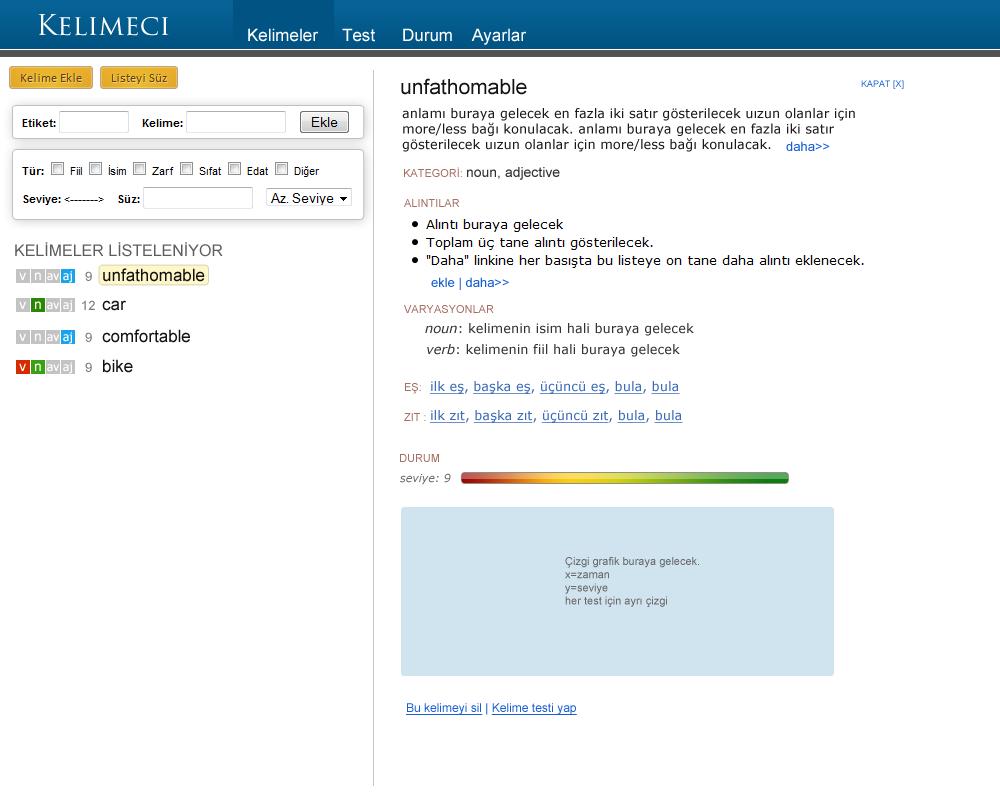
<style>
.page{position:relative;width:1000px;height:800px;background:#ffffff}
.page>*{position:absolute;margin:0}
.t1{font:28px "TrajanPro-Regular";color:#ffffff}
.t2{font:17px "ArialMT";color:#ffffff}
.t3{font:21px "ArialMT";color:#121212}
.t4{font:9px "ArialMT"}
.t5{font:13px "Verdana";color:#1a1a1a}
.t6{font:13px "ArialMT";color:#185fd4}
.t7{font:14px "ArialMT";color:#333333}
.t8{font:11px "ArialMT";color:#a56f64}
.t9{font:16px "ArialMT";color:#5d5d5d}
.t10{font:17px "ArialMT";color:#121212}
.t11{font:14px "ArialMT";color:#ffffff}
.t12{font:12px "Tahoma";color:#ffffff}
.t13{font:13px "ArialMT";color:#797979}
.t14{font:13px "Verdana";color:#333333}
.t15{font:13px "Verdana-Italic";color:#333333}
.t16{font:13px "Verdana";color:#3d6bb8;text-decoration:underline}
.t17{font:13px "Verdana";color:#3d6bb8}
.t18{font:11px "Verdana-Italic";color:#696969}
.t19{font:11px "ArialMT";color:#696969}
.t20{font:12px "ArialMT";color:#185fd4;text-decoration:underline}
.t21{font:12px "ArialMT";color:#185fd4}
</style>
<div class="page">
<p class="t1" style="left:38px;top:14px;width:131px;height:22px">Kelimeci</p>
<p class="t2" style="left:248px;top:28px;width:71px;height:14px">Kelimeler</p>
<p class="t2" style="left:342px;top:28px;width:33px;height:14px">Test</p>
<p class="t2" style="left:403px;top:28px;width:49px;height:14px">Durum</p>
<p class="t2" style="left:471px;top:28px;width:56px;height:17px">Ayarlar</p>
<p class="t3" style="left:401px;top:78px;width:126px;height:17px">unfathomable</p>
<p class="t4" style="left:861px;top:80px;width:43px;height:9px">KAPAT [X]</p>
<p class="t5" style="left:402px;top:108px;width:453px;height:44px">anlamı buraya gelecek en fazla iki satır gösterilecek uızun olanlar için more/less bağı konulacak. anlamı buraya gelecek en fazla iki satır gösterilecek uızun olanlar için more/less bağı konulacak.</p>
<p class="t6" style="left:786px;top:141px;width:44px;height:10px">daha&gt;&gt;</p>
<p class="t7" style="left:404px;top:167px;width:156px;height:13px"><span class="t8">KATEGORİ: </span>noun, adjective</p>
<p class="t8" style="left:404px;top:199px;width:56px;height:8px">ALINTILAR</p>
<p class="t9" style="left:15px;top:242px;width:208px;height:15px">KELİMELER LİSTELENİYOR</p>
<p class="t10" style="left:103px;top:268px;width:102px;height:14px">unfathomable</p>
<p class="t11" style="left:19px;top:272px;width:7px;height:8px">v</p>
<p class="t11" style="left:35px;top:272px;width:6px;height:8px">n</p>
<p class="t12" style="left:47px;top:273px;width:13px;height:8px">av</p>
<p class="t12" style="left:63px;top:271px;width:9px;height:12px">aj</p>
<p class="t13" style="left:85px;top:271px;width:7px;height:10px">9</p>
<p class="t6" style="left:431px;top:277px;width:78px;height:13px">ekle | daha&gt;&gt;</p>
<p class="t11" style="left:19px;top:301px;width:7px;height:8px">v</p>
<p class="t11" style="left:35px;top:301px;width:6px;height:8px">n</p>
<p class="t12" style="left:47px;top:302px;width:13px;height:8px">av</p>
<p class="t12" style="left:63px;top:300px;width:9px;height:12px">aj</p>
<p class="t13" style="left:82px;top:300px;width:13px;height:10px">12</p>
<p class="t10" style="left:102px;top:300px;width:24px;height:11px">car</p>
<p class="t8" style="left:404px;top:305px;width:90px;height:8px">VARYASYONLAR</p>
<p class="t10" style="left:102px;top:329px;width:88px;height:14px">comfortable</p>
<p class="t14" style="left:425px;top:323px;width:269px;height:13px"><span class="t15">noun</span>: kelimenin isim hali buraya gelecek</p>
<p class="t11" style="left:19px;top:333px;width:7px;height:8px">v</p>
<p class="t11" style="left:35px;top:333px;width:6px;height:8px">n</p>
<p class="t12" style="left:47px;top:334px;width:13px;height:8px">av</p>
<p class="t12" style="left:63px;top:332px;width:9px;height:12px">aj</p>
<p class="t13" style="left:85px;top:332px;width:7px;height:10px">9</p>
<p class="t14" style="left:427px;top:344px;width:253px;height:13px"><span class="t15">verb</span>: kelimenin fiil hali buraya gelecek</p>
<p class="t11" style="left:19px;top:363px;width:7px;height:8px">v</p>
<p class="t11" style="left:35px;top:363px;width:6px;height:8px">n</p>
<p class="t12" style="left:47px;top:364px;width:13px;height:8px">av</p>
<p class="t12" style="left:63px;top:362px;width:9px;height:12px">aj</p>
<p class="t13" style="left:85px;top:362px;width:7px;height:10px">9</p>
<p class="t10" style="left:103px;top:359px;width:30px;height:14px">bike</p>
<p class="t8" style="left:405px;top:383px;width:16px;height:11px">EŞ:</p>
<p class="t16" style="left:430px;top:381px;width:250px;height:13px">ilk eş<span class="t17">, </span>başka eş<span class="t17">, </span>üçüncü eş<span class="t17">, </span>bula<span class="t17">, </span>bula</p>
<p class="t8" style="left:404px;top:413px;width:22px;height:8px">ZIT :</p>
<p class="t16" style="left:430px;top:410px;width:253px;height:13px">ilk zıt<span class="t17">, </span>başka zıt<span class="t17">, </span>üçüncü zıt<span class="t17">, </span>bula<span class="t17">, </span>bula</p>
<p class="t8" style="left:400px;top:454px;width:39px;height:8px">DURUM</p>
<p class="t18" style="left:400px;top:473px;width:51px;height:12px">seviye: 9</p>
<p class="t19" style="left:565px;top:557px;width:134px;height:50px">Çizgi grafik buraya gelecek.<br>x=zaman<br>y=seviye<br>her test için ayrı çizgi</p>
<p class="t20" style="left:406px;top:703px;width:171px;height:12px">Bu kelimeyi sil<span class="t21"> | </span>Kelime testi yap</p>
</div>
